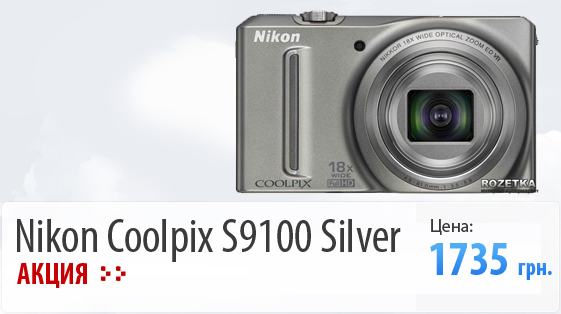
<style>
.page{position:relative;width:561px;height:314px}
.page>*{position:absolute;margin:0}
.t1{font:48px "MyriadPro-Cond";color:#3a3a3a}
.t2{font:18px "MyriadPro-Regular";color:#3a3a3a}
.t3{font:48px "MyriadPro-BoldCond";color:#3894f1}
.t4{font:24px "MyriadPro-BoldCond";color:#3894f1}
.t5{font:30px "MyriadPro-BoldCond";color:#c80003}
</style>
<div class="page">
<p class="t1" style="left:17px;top:219px;width:384px;height:43px">Nikon Coolpix S9100 Silver</p>
<p class="t2" style="left:431px;top:219px;width:42px;height:16px">Цена:</p>
<p class="t3" style="left:430px;top:243px;width:122px;height:37px">1735 <span class="t4">грн.</span></p>
<p class="t5" style="left:17px;top:263px;width:70px;height:25px">АКЦИЯ</p>
</div>
